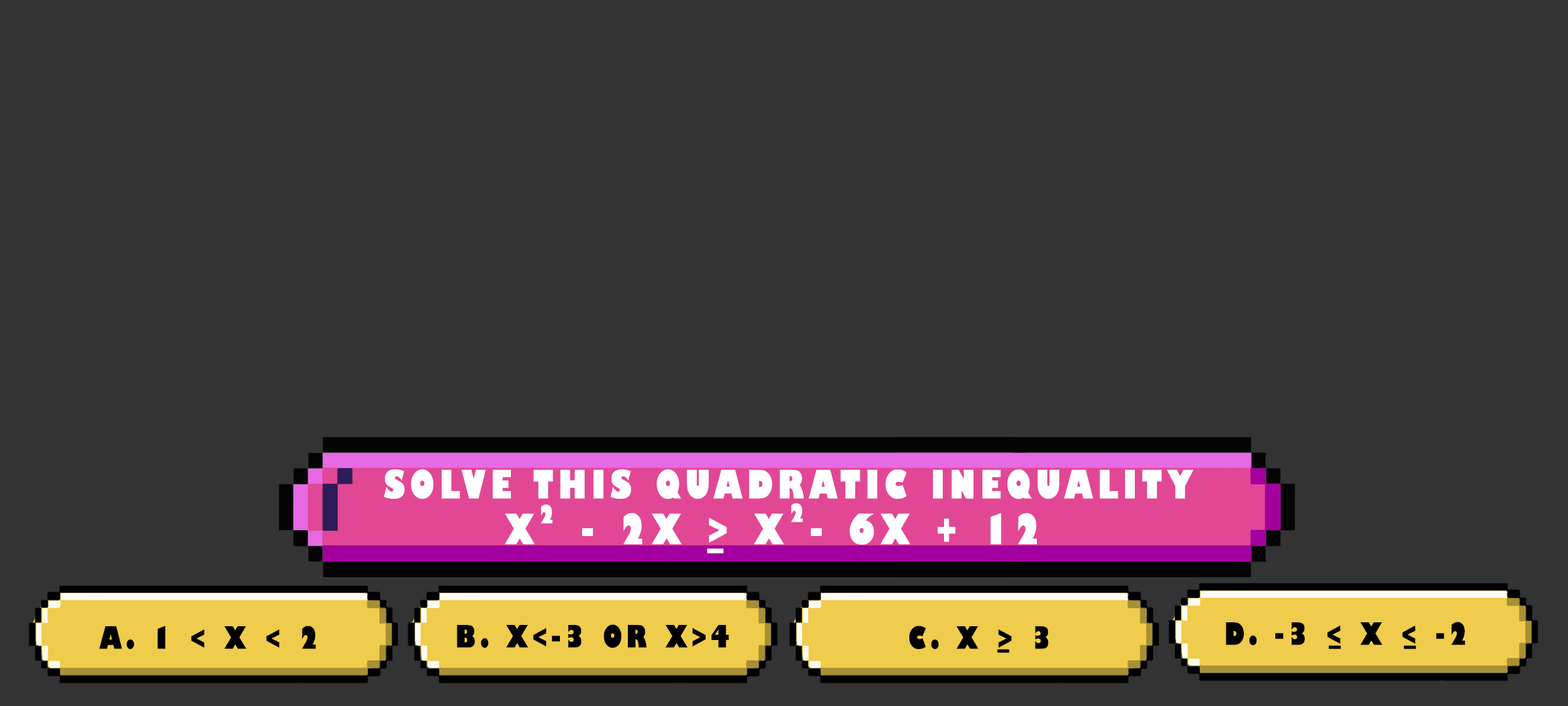
<style>
.page{position:relative;width:1568px;height:706px;background:#333333}
.page>*{position:absolute;margin:0}
.t1{font:38.1px "GillSans-UltraBoldCondensed";letter-spacing:0.115em;color:#ffffff;text-transform:uppercase;scale:1.12 1}
.t2{font:24.5px "GillSans-UltraBoldCondensed";letter-spacing:0.115em;color:#ffffff;text-transform:uppercase;scale:1.12 1}
.t3{font:40.8px "GillSans-UltraBoldCondensed";letter-spacing:0.115em;color:#ffffff;text-transform:uppercase;scale:1.12 1}
.t4{font:29.9px "GillSans-UltraBoldCondensed";letter-spacing:0.115em;color:#000000;text-transform:uppercase;scale:1.12 1}
</style>
<div class="page">
<p class="t1" style="left:384px;top:469px;width:810px;height:30px">solve this quadratic inequality</p>
<p class="t2" style="left:541px;top:504px;width:12px;height:19px">2</p>
<p class="t2" style="left:791px;top:502px;width:12px;height:20px">2</p>
<p class="t3" style="left:504px;top:512px;width:533px;height:33px">x  - 2x &gt; x - 6x + 12</p>
<p class="t3" style="left:707px;top:548px;width:17px;height:5px">_</p>
<p class="t4" style="left:99px;top:625px;width:217px;height:24px">a. 1 &lt; x &lt; 2</p>
<p class="t4" style="left:457px;top:624px;width:272px;height:23px">b. x&lt;-3 or x&gt;4</p>
<p class="t4" style="left:909px;top:625px;width:140px;height:24px">c. x &gt; 3</p>
<p class="t4" style="left:1226px;top:621px;width:239px;height:24px">d. -3 &lt; x &lt; -2</p>
<p class="t4" style="left:997px;top:649px;width:12px;height:4px">_</p>
<p class="t4" style="left:1328px;top:645px;width:13px;height:4px">_</p>
<p class="t4" style="left:1403px;top:645px;width:13px;height:4px">_</p>
</div>
